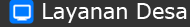
<style>
.page{position:relative;width:190px;height:27px;background:#333333}
.page>*{position:absolute;margin:0}
.t1{font:20.8px "Verdana";color:#ffffff}
</style>
<div class="page">
<p class="t1" style="left:43px;top:3px;width:144px;height:20px">Layanan Desa</p>
</div>
